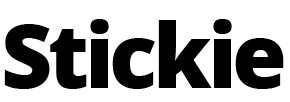
<style>
.page{position:relative;width:290px;height:102px;background:#ffffff}
.page>*{position:absolute;margin:0}
.t1{font:89.4px "OpenSans-Extrabold";letter-spacing:-0.05em;color:#000000}
</style>
<div class="page">
<p class="t1" style="left:4px;top:19px;width:280px;height:70px">Stickie</p>
</div>
